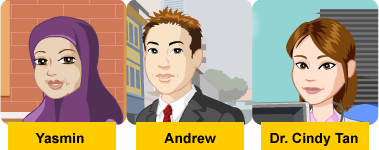
<style>
.page{position:relative;width:379px;height:150px}
.page>*{position:absolute;margin:0}
.t1{font:14px "Arial-BoldMT";color:#010101}
</style>
<div class="page">
<p class="t1" style="left:35px;top:133px;width:49px;height:11px">Yasmin</p>
<p class="t1" style="left:164px;top:133px;width:52px;height:11px">Andrew</p>
</div>
